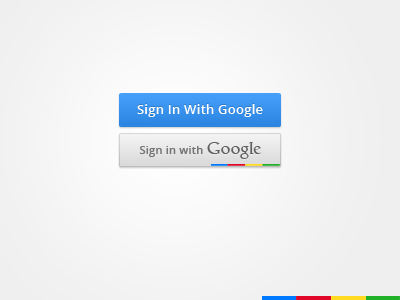
<style>
.page{position:relative;width:400px;height:300px}
.page>*{position:absolute;margin:0}
.t1{font:13px "OpenSans-Semibold";letter-spacing:0.02em;color:#ffffff}
.t2{font:11px "OpenSans-Semibold";letter-spacing:0.02em;color:#757575}
.t3{font:17px "Catull-Regular";letter-spacing:0.02em;color:#606060}
</style>
<div class="page">
<p class="t1" style="left:137px;top:104px;width:126px;height:13px">Sign In With Google</p>
<p class="t2" style="left:139px;top:146px;width:64px;height:11px">Sign in with</p>
<p class="t3" style="left:207px;top:142px;width:54px;height:17px">Google</p>
</div>
